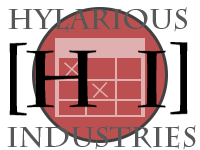
<style>
.page{position:relative;width:200px;height:150px;background:#ffffff}
.page>*{position:absolute;margin:0}
.t1{font:28px "CharlemagneStd-Bold";color:#575757;font-variant:small-caps}
</style>
<div class="page">
<p class="t1" style="left:8px;top:7px;width:179px;height:26px">HYLARIOUS</p>
<p class="t1" style="left:7px;top:125px;width:189px;height:25px">INDUSTRIES</p>
</div>
